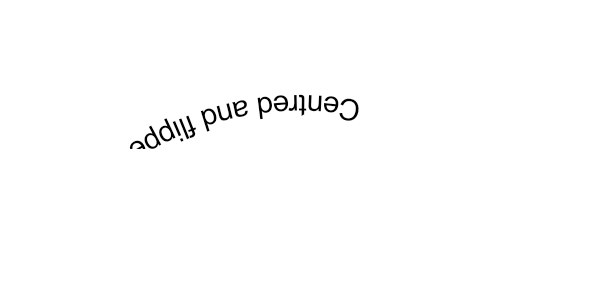
<style>
.page{position:relative;width:600px;height:300px;background:#ffffff}
.page>*{position:absolute;margin:0}
.t1{font:30px "ArialMT";color:#000000}
</style>
<div class="page">
<p class="t1" style="left:129px;top:94px;width:230px;height:55px;text-align:center">Centred and flipped</p>
</div>
